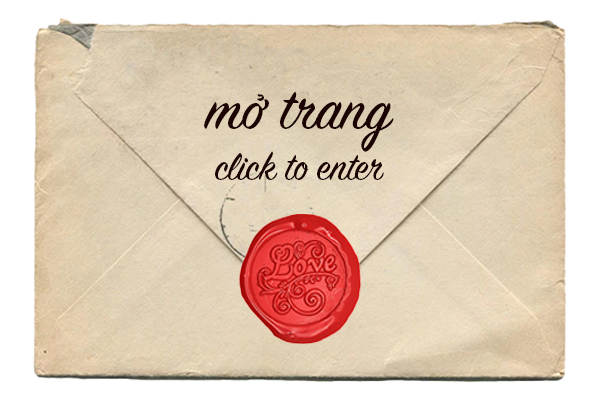
<style>
.page{position:relative;width:600px;height:400px;background:#ffffff}
.page>*{position:absolute;margin:0}
.t1{font:42.4px "SignPainter-HouseScript";color:#1d0404}
.t2{font:63.6px "SignPainter-HouseScript";color:#1d0404}
</style>
<div class="page">
<p class="t1" style="left:204px;top:91px;width:190px;height:89px;text-align:center"><span class="t2">mở trang<br></span>click to enter</p>
</div>
